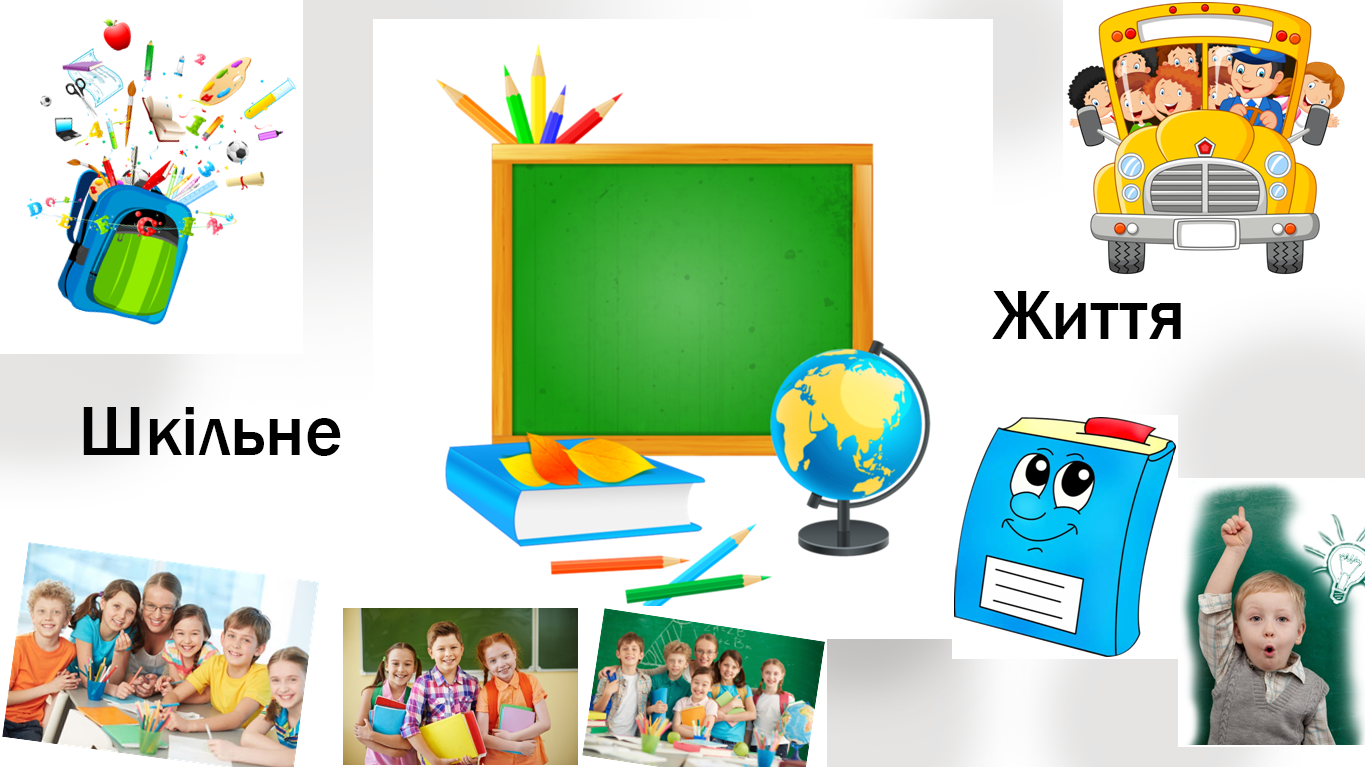
<style>
.page{position:relative;width:1365px;height:767px;background:#ffffff}
.page>*{position:absolute;margin:0}
.t1{font:72px "FranklinGothic-Medium";color:#000000}
</style>
<div class="page">
<p class="t1" style="left:992px;top:291px;width:189px;height:48px">Життя</p>
<p class="t1" style="left:83px;top:407px;width:258px;height:49px">Шкільне</p>
</div>
